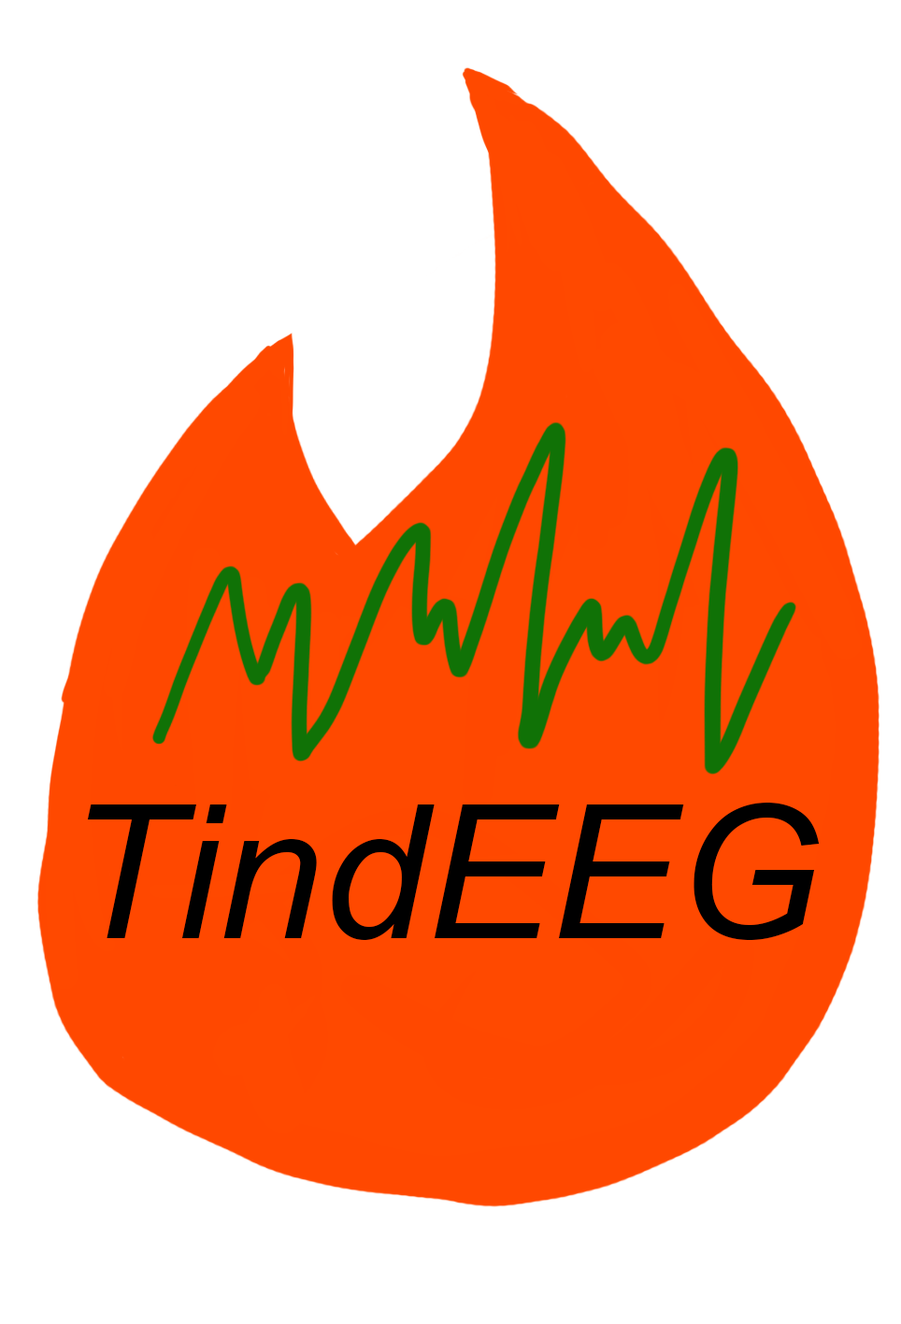
<style>
.page{position:relative;width:901px;height:1324px;background:#ffffff}
.page>*{position:absolute;margin:0}
.t1{font:186.9px "Arial-ItalicMT";color:#000000}
</style>
<div class="page">
<p class="t1" style="left:87px;top:803px;width:732px;height:137px">TindEEG</p>
</div>
